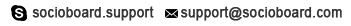
<style>
.page{position:relative;width:351px;height:26px;background:#ffffff}
.page>*{position:absolute;margin:0}
.t1{font:13.5px "ArialMT";color:#353535;font-weight:bold}
</style>
<div class="page">
<p class="t1" style="left:32px;top:6px;width:122px;height:15px">socioboard.support</p>
<p class="t1" style="left:181px;top:6px;width:161px;height:15px">support@socioboard.com</p>
</div>
